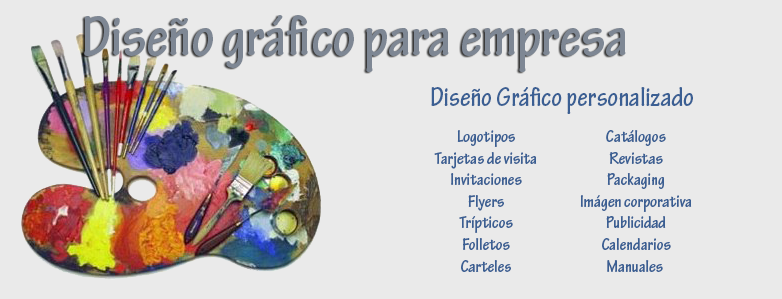
<style>
.page{position:relative;width:782px;height:299px;background:#eaeaea}
.page>*{position:absolute;margin:0}
.t1{font:60px "TektonPro-BoldCond";color:#7e8794}
.t2{font:28px "TektonPro-BoldCond";color:#3b5f93}
.t3{font:18px "TektonPro-BoldCond";color:#3b5f93}
</style>
<div class="page">
<p class="t1" style="left:84px;top:15px;width:542px;height:57px">Diseño gráfico para empresa</p>
<p class="t2" style="left:431px;top:87px;width:262px;height:27px">Diseño Gráfico personalizado</p>
<p class="t3" style="left:434px;top:130px;width:103px;height:142px;text-align:center">Logotipos<br>Tarjetas de visita<br>Invitaciones<br>Flyers<br>Trípticos<br>Folletos<br>Carteles</p>
<p class="t3" style="left:580px;top:130px;width:112px;height:142px;text-align:center">Catálogos<br>Revistas<br>Packaging<br>Imágen corporativa<br>Publicidad<br>Calendarios<br>Manuales</p>
</div>
